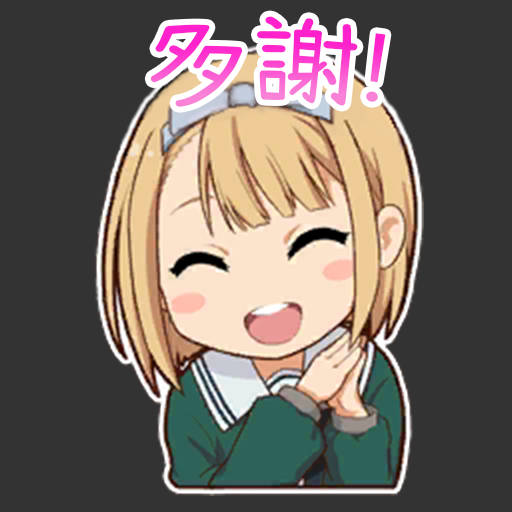
<style>
.page{position:relative;width:512px;height:512px;background:#333333}
.page>*{position:absolute;margin:0}
.t1{font:96.6px "SetoFont"}
.t2{font:96.6px "YuGothicUI-Regular"}
</style>
<div class="page">
<p class="t1" style="left:150px;top:16px;width:236px;height:91px">多謝<span class="t2">!</span></p>
</div>
